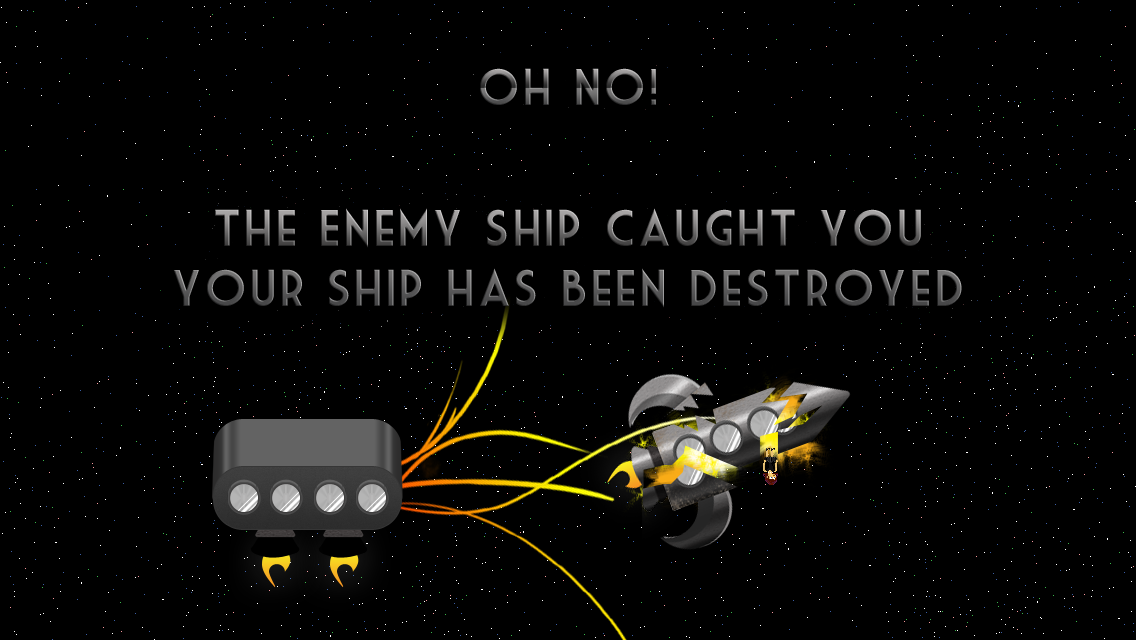
<style>
.page{position:relative;width:1136px;height:640px;background:#000000}
.page>*{position:absolute;margin:0}
.t1{font:50px "MarketDeco";letter-spacing:0.04em}
</style>
<div class="page">
<p class="t1" style="left:480px;top:68px;width:176px;height:37px">Oh No!</p>
<p class="t1" style="left:173px;top:208px;width:789px;height:100px;text-align:center">The Enemy Ship caught you<br>your ship has been destroyed</p>
</div>
